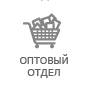
<style>
.page{position:relative;width:90px;height:90px;background:#ffffff}
.page>*{position:absolute;margin:0}
.t1{font:10px "Tahoma";letter-spacing:0.025em;color:#646363}
</style>
<div class="page">
<p class="t1" style="left:20px;top:54px;width:48px;height:24px;text-align:center">ОПТОВЫЙ<br>ОТДЕЛ</p>
</div>
